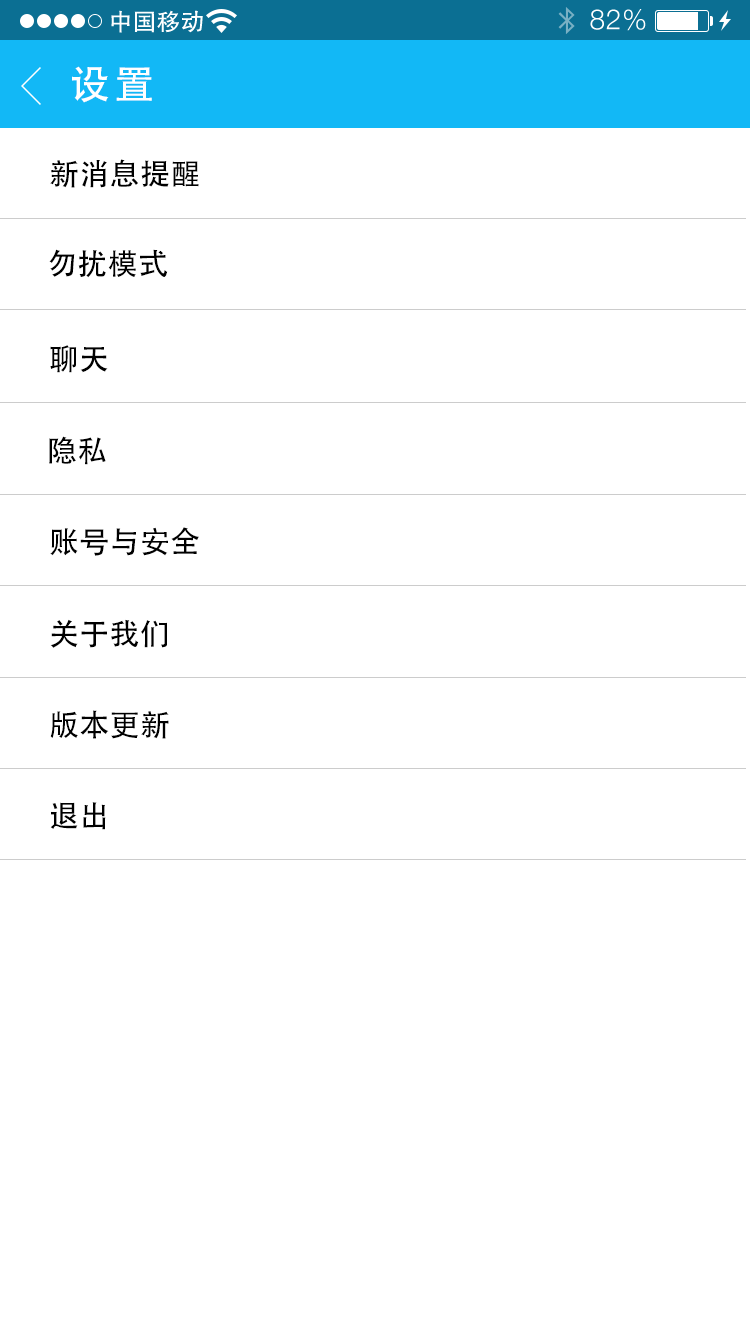
<style>
.page{position:relative;width:750px;height:1334px;background:#ffffff}
.page>*{position:absolute;margin:0}
.t1{font:40px "AdobeHeitiStd-Regular";letter-spacing:0.104em;color:#ffffff}
.t2{font:30px "AdobeHeitiStd-Regular";letter-spacing:0.01em;color:#000000}
</style>
<div class="page">
<p class="t1" style="left:72px;top:66px;width:80px;height:37px">设置</p>
<p class="t2" style="left:50px;top:159px;width:149px;height:29px">新消息提醒</p>
<p class="t2" style="left:49px;top:249px;width:119px;height:29px">勿扰模式</p>
<p class="t2" style="left:50px;top:345px;width:58px;height:28px">聊天</p>
<p class="t2" style="left:49px;top:436px;width:57px;height:29px">隐私</p>
<p class="t2" style="left:50px;top:527px;width:149px;height:29px">账号与安全</p>
<p class="t2" style="left:50px;top:619px;width:117px;height:29px">关于我们</p>
<p class="t2" style="left:50px;top:710px;width:119px;height:29px">版本更新</p>
<p class="t2" style="left:50px;top:802px;width:56px;height:28px">退出</p>
</div>
